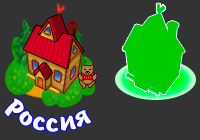
<style>
.page{position:relative;width:200px;height:140px;background:#333333}
.page>*{position:absolute;margin:0}
.t1{font:30px "BrushType-Bold";letter-spacing:0.025em;color:#ffffff;scale:0.95 1}
</style>
<div class="page">
<p class="t1" style="left:4px;top:98px;width:87px;height:34px;rotate:6deg">Ðîññèÿ</p>
</div>
